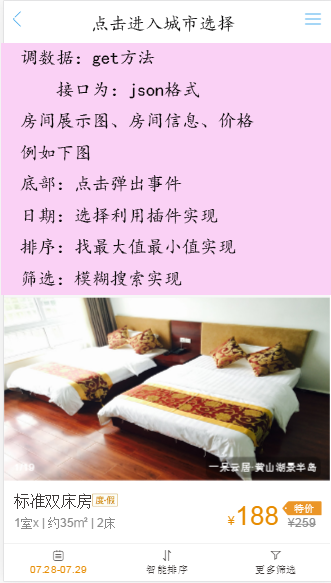
<style>
.page{position:relative;width:331px;height:583px;background:#fad1f5}
.page>*{position:absolute;margin:0}
.t1{font:18px "¿¬Ìå";color:#0c0b0c}
</style>
<div class="page">
<p class="t1" style="left:92px;top:15px;width:143px;height:17px">点击进入城市选择</p>
<p class="t1" style="left:20px;top:50px;width:234px;height:237px">调数据：get方法<br> 接口为：json格式<br>房间展示图、房间信息、价格<br>例如下图<br>底部：点击弹出事件<br>日期：选择利用插件实现<br>排序：找最大值最小值实现<br>筛选：模糊搜索实现</p>
</div>
